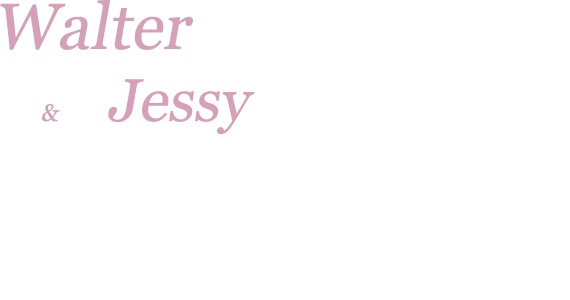
<style>
.page{position:relative;width:570px;height:300px;background:#ffffff}
.page>*{position:absolute;margin:0}
.t1{font:65px "Georgia";color:#d4a1b9;font-style:italic}
.t2{font:24px "Georgia";color:#d4a1b9;font-style:italic}
.t3{font:60px "Georgia";color:#d4a1b9;font-style:italic}
</style>
<div class="page">
<p class="t1" style="left:0px;top:0px;width:255px;height:135px">Walter<br><span class="t2">   &amp;   </span><span class="t3">Jessy</span></p>
</div>
